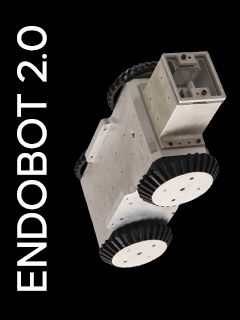
<style>
.page{position:relative;width:240px;height:320px;background:#000000}
.page>*{position:absolute;margin:0}
.t1{font:44.9px "Causten-Medium";color:#ffffff}
</style>
<div class="page">
<p class="t1" style="left:17px;top:26px;width:30px;height:265px;rotate:-90deg">ENDOBOT 2.0</p>
</div>
